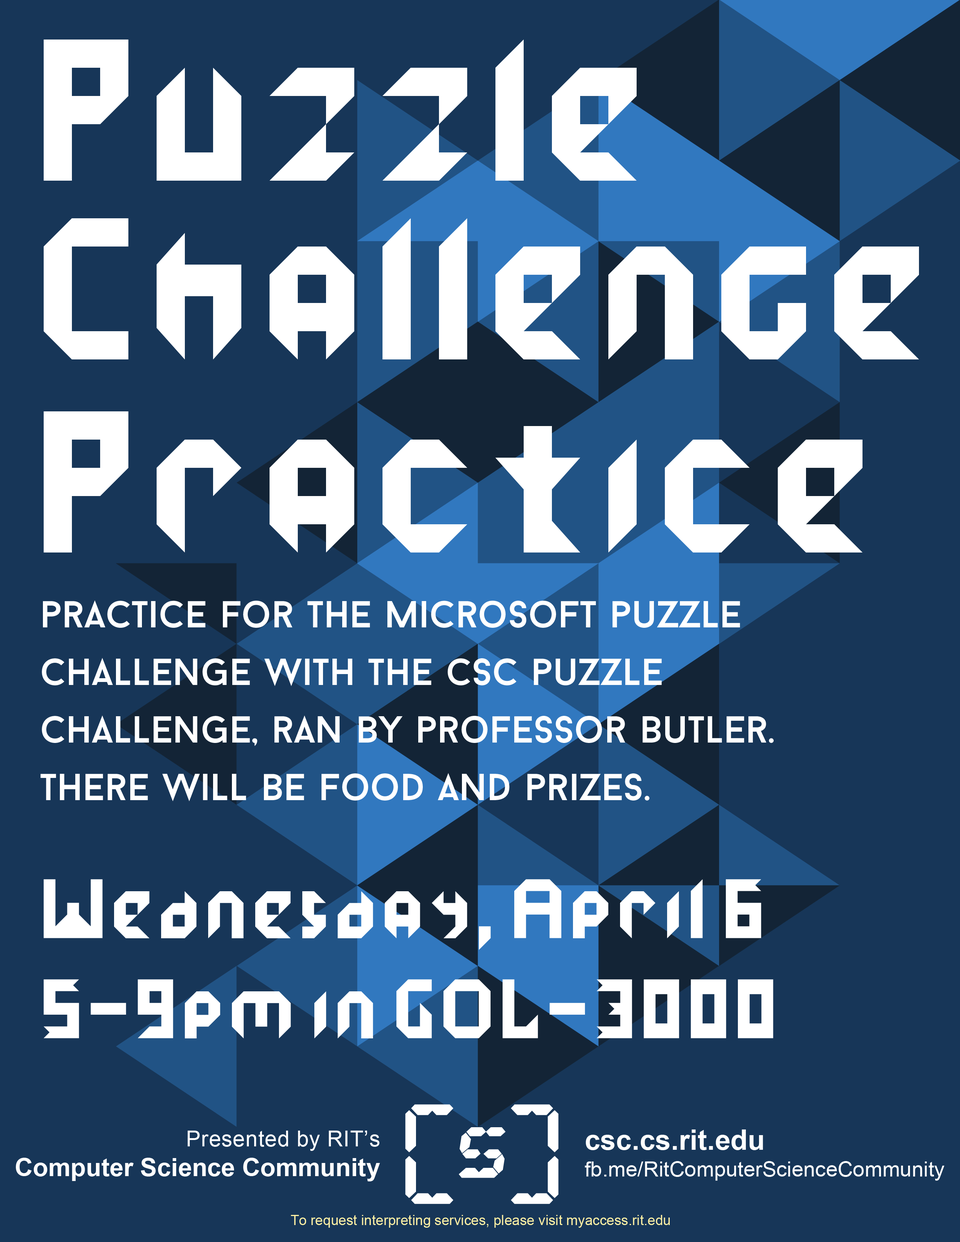
<style>
.page{position:relative;width:960px;height:1242px;background:#173658}
.page>*{position:absolute;margin:0}
.t1{font:47.1px/100.4px "ice-demon";color:#ffffff}
.t2{font:112.9px/178.8px "ice-demon";color:#ffffff}
.t3{font:126.5px/178.8px "ice-demon";color:#ffffff;scale:0.89 1}
.t4{font:112.9px/192.9px "ice-demon";color:#ffffff}
.t5{font:47.1px/192.9px "ice-demon";color:#ffffff}
.t6{font:47.1px/80px "ice-demon";color:#ffffff}
.t7{font:58.8px/100.4px "ice-demon";color:#ffffff;scale:0.8 1}
.t8{font:37.5px/57.6px "BaronNeue";color:#ffffff}
.t9{font:25.1px/29.8px "Arial-BoldMT";color:#ffffff}
.t10{font:22px/29.8px "ArialMT";letter-spacing:0.02em;color:#ffffff}
.t11{font:21.2px/26.7px "ArialMT";color:#ffffff}
.t12{font:28.2px/26.7px "Arial-BoldMT";color:#ffffff}
.t13{font:13.9px "ArialMT";color:#fff1a4}
</style>
<div class="page">
<p class="t1" style="left:44px;top:40px;width:875px;height:999px"><span class="t2">PuzzIe<br>C</span><span class="t3">h</span><span class="t2">aIIenge<br>Prac</span><span class="t3">t</span><span class="t4">ice<br></span><span class="t5"><br>W</span><span class="t6">ednesday, ApriI </span>6<br>5-9pm in GOL-3<span class="t7">ooo</span></p>
<p class="t8" style="left:40px;top:600px;width:734px;height:201px">practice for the Microsoft puzzle Challenge With the CSC puzzle challenge, ran by professor Butler. There will be food and prizes.</p>
<p class="t9" style="left:16px;top:1131px;width:364px;height:51px;text-align:right"><span class="t10">Presented by RIT’s<br></span>Computer Science Community</p>
<p class="t11" style="left:585px;top:1130px;width:359px;height:51px"><span class="t12">csc.cs.rit.edu<br></span>fb.me/RitComputerScienceCommunity</p>
<p class="t13" style="left:291px;top:1215px;width:379px;height:13px">To request interpreting services, please visit myaccess.rit.edu</p>
</div>
